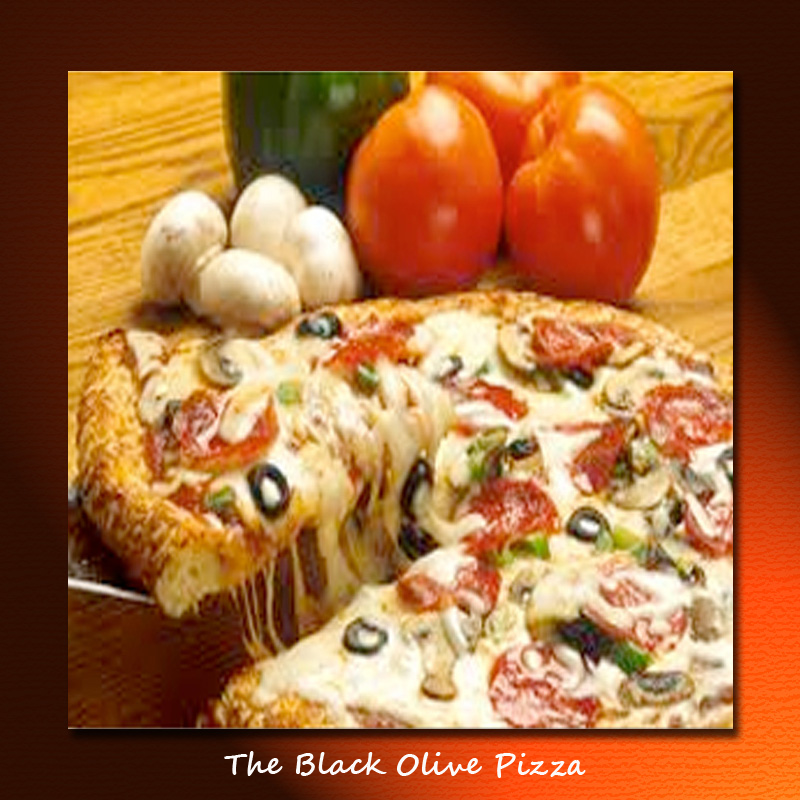
<style>
.page{position:relative;width:800px;height:800px}
.page>*{position:absolute;margin:0}
.t1{font:30px "SegoeScript-Bold";color:#fbfafa}
</style>
<div class="page">
<p class="t1" style="left:224px;top:751px;width:362px;height:27px">The Black Olive Pizza</p>
</div>
